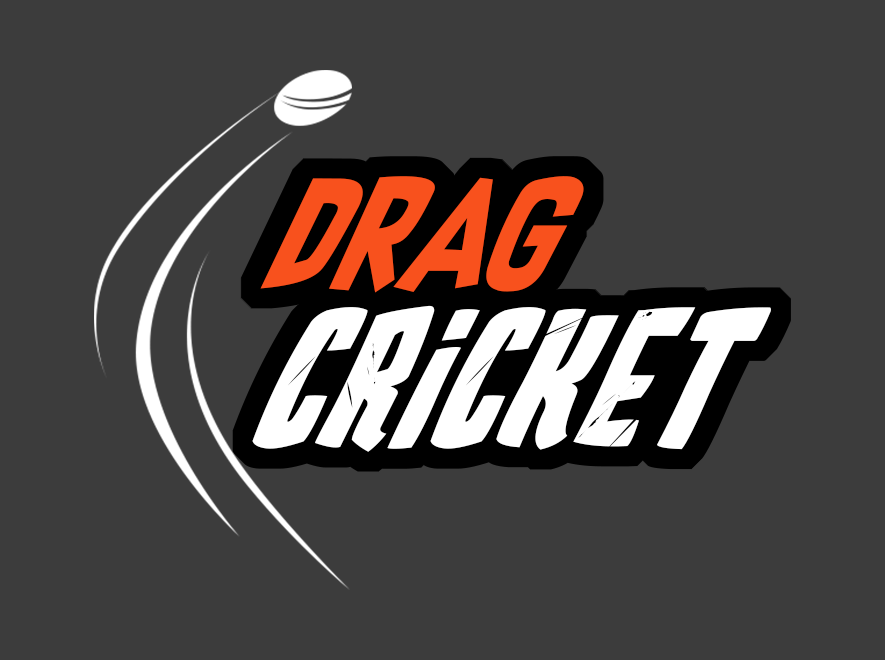
<style>
.page{position:relative;width:885px;height:660px;background:#3c3c3c}
.page>*{position:absolute;margin:0}
.t1{font:142.2px "SupersonicRocketship";color:#f8511d;scale:0.92 1}
.t2{font:123px "EdWoodMovies";color:#ffffff;scale:0.92 1}
</style>
<div class="page">
<p class="t1" style="left:260px;top:176px;width:324px;height:117px">DRAG</p>
<p class="t2" style="left:252px;top:305px;width:519px;height:147px">CRICKET</p>
</div>
